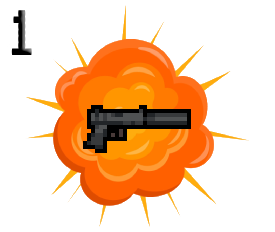
<style>
.page{position:relative;width:275px;height:232px;background:#ffffff}
.page>*{position:absolute;margin:0}
.t1{font:80px "VT323-Regular"}
.t2{font:24px "DelaGothicOne-Regular"}
</style>
<div class="page">
<p class="t1" style="left:11px;top:10px;width:21px;height:45px"><span class="t2"><br></span>1</p>
</div>
